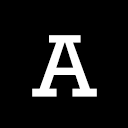
<style>
.page{position:relative;width:128px;height:128px;background:#000000}
.page>*{position:absolute;margin:0}
.t1{font:89.9px "Rockwell";color:#ffffff}
</style>
<div class="page">
<p class="t1" style="left:32px;top:35px;width:65px;height:62px">A</p>
</div>
